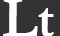
<style>
.page{position:relative;width:60px;height:36px;background:#333333}
.page>*{position:absolute;margin:0}
.t1{font:55.7px "Garamond-Bold";color:#ffffff}
</style>
<div class="page">
<p class="t1" style="left:3px;top:0px;width:51px;height:37px">Lt</p>
</div>
